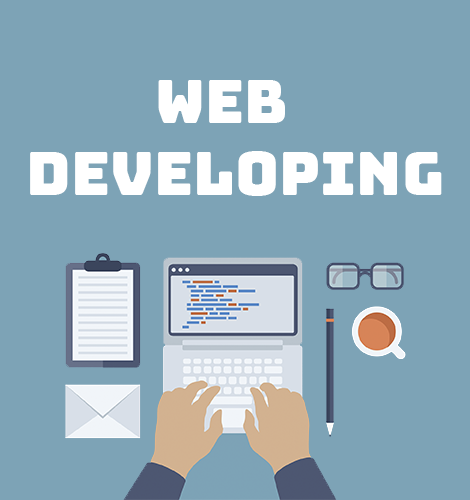
<style>
.page{position:relative;width:470px;height:500px;background:#7da3b6}
.page>*{position:absolute;margin:0}
.t1{font:60px "Bungee-Regular";color:#ffffff}
</style>
<div class="page">
<p class="t1" style="left:30px;top:80px;width:412px;height:116px;text-align:center">WEB  <br>Developing</p>
</div>
